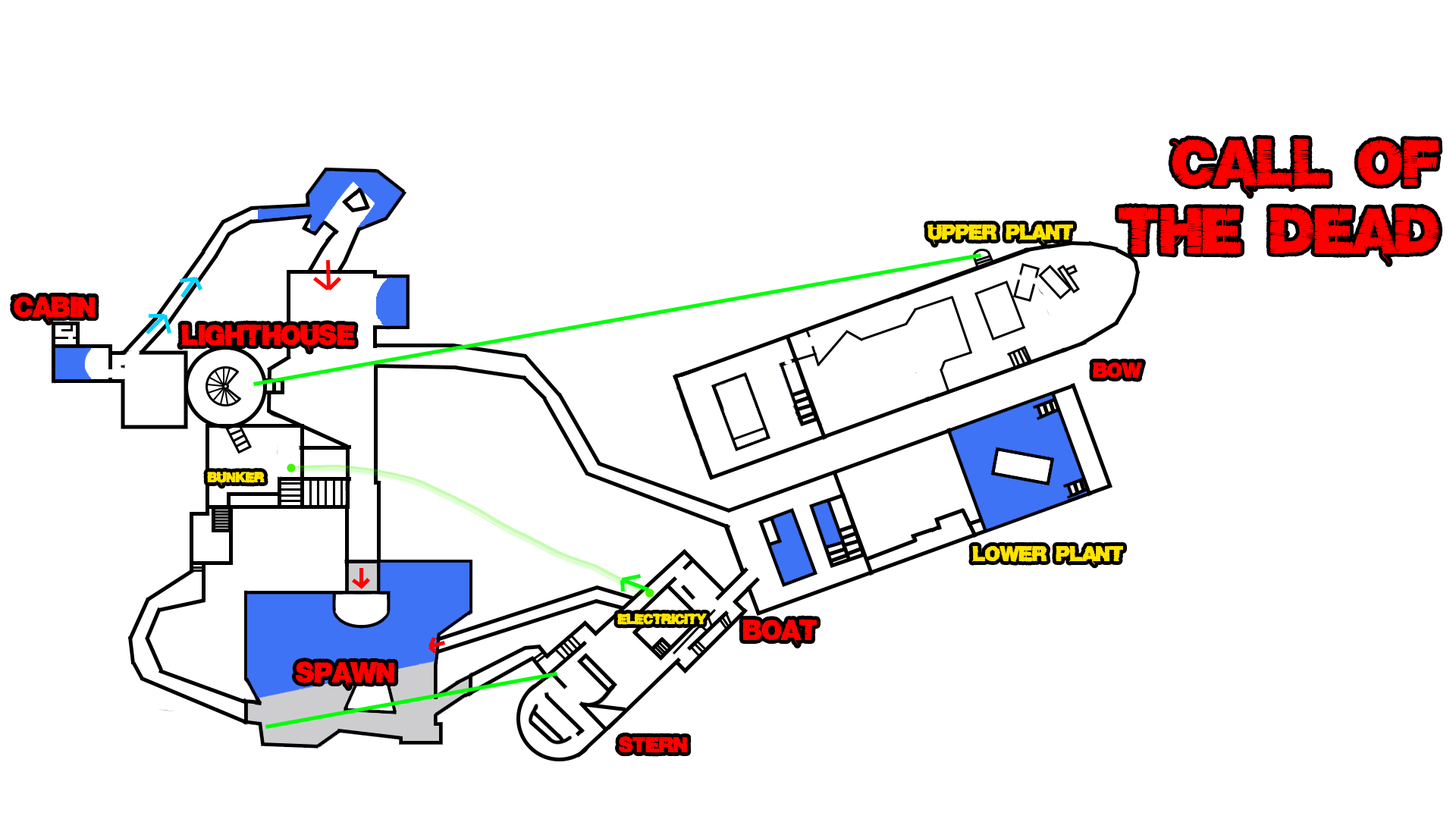
<style>
.page{position:relative;width:1456px;height:819px;background:#ffffff}
.page>*{position:absolute;margin:0}
.t1{font:56.9px "Base05";color:#ff0000}
.t2{font:19px "Base05";color:#ffe400}
.t3{font:25.3px "Base05";color:#ff0000}
.t4{font:19px "Base05";color:#ff0000}
.t5{font:12.6px "Base05";color:#ffe400}
</style>
<div class="page">
<p class="t1" style="left:1119px;top:139px;width:320px;height:125px;text-align:right">Call of<br>the dead</p>
<p class="t2" style="left:927px;top:224px;width:146px;height:20px">upper plant</p>
<p class="t3" style="left:14px;top:297px;width:82px;height:25px">cabin</p>
<p class="t3" style="left:14px;top:297px;width:82px;height:25px">cabin</p>
<p class="t3" style="left:180px;top:324px;width:175px;height:27px">lighthouse</p>
<p class="t4" style="left:1093px;top:362px;width:49px;height:16px">bow</p>
<p class="t5" style="left:207px;top:472px;width:58px;height:13px">bunker</p>
<p class="t2" style="left:972px;top:546px;width:151px;height:19px">lower plant</p>
<p class="t5" style="left:617px;top:613px;width:90px;height:12px">electricity</p>
<p class="t3" style="left:742px;top:619px;width:75px;height:26px">boat</p>
<p class="t3" style="left:296px;top:661px;width:99px;height:27px">Spawn</p>
<p class="t4" style="left:619px;top:736px;width:69px;height:17px">stern</p>
</div>
